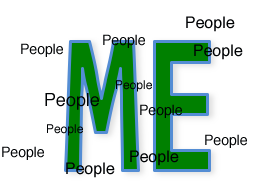
<style>
.page{position:relative;width:263px;height:182px;background:#ffffff}
.page>*{position:absolute;margin:0}
.t1{font:16px "Helvetica";color:#000204}
.t2{font:14px "Helvetica";color:#000204}
.t3{font:12px "Helvetica";color:#000204}
.t4{font:18px "Helvetica";color:#000204}
</style>
<div class="page">
<p class="t1" style="left:186px;top:16px;width:49px;height:16px">People</p>
<p class="t2" style="left:103px;top:34px;width:42px;height:14px">People</p>
<p class="t2" style="left:21px;top:43px;width:42px;height:14px">People</p>
<p class="t1" style="left:194px;top:44px;width:49px;height:16px">People</p>
<p class="t3" style="left:116px;top:80px;width:36px;height:12px">People</p>
<p class="t4" style="left:45px;top:93px;width:54px;height:17px">People</p>
<p class="t2" style="left:140px;top:104px;width:42px;height:14px">People</p>
<p class="t3" style="left:47px;top:124px;width:36px;height:12px">People</p>
<p class="t2" style="left:205px;top:134px;width:42px;height:14px">People</p>
<p class="t2" style="left:2px;top:146px;width:42px;height:14px">People</p>
<p class="t1" style="left:130px;top:150px;width:49px;height:16px">People</p>
<p class="t1" style="left:66px;top:162px;width:49px;height:16px">People</p>
</div>
